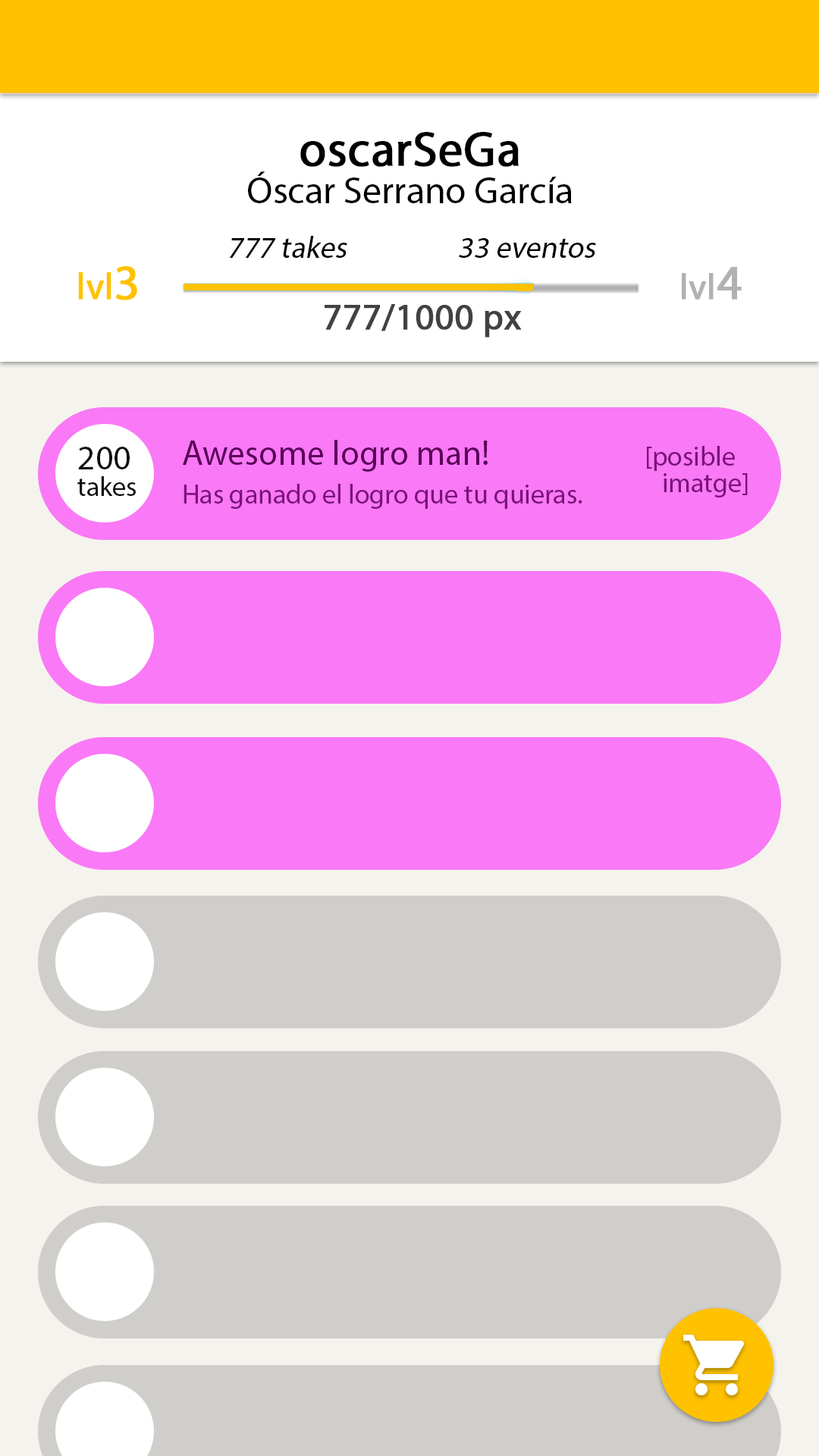
<style>
.page{position:relative;width:819px;height:1456px;background:#cfcecb}
.page>*{position:absolute;margin:0}
.t1{font:37.9px/37.9px "MyriadPro-Regular";color:#000000}
.t2{font:48.5px/31.1px "MyriadPro-Regular";color:#000000;font-weight:bold}
.t3{font:30.3px "MyriadPro-Regular";color:#000000;font-style:italic}
.t4{font:36.4px "MyriadPro-Regular";color:#ffc200;font-weight:bold}
.t5{font:48.5px "MyriadPro-Regular";color:#ffc200;font-weight:bold}
.t6{font:35.6px "MyriadPro-Regular";color:#b3b0b3;font-weight:bold}
.t7{font:48.5px "MyriadPro-Regular";color:#b3b0b3;font-weight:bold}
.t8{font:36.4px "MyriadPro-Regular";color:#424242;font-weight:bold}
.t9{font:27.3px/26.5px "MyriadPro-Regular";color:#101010}
.t10{font:34.9px/26.5px "MyriadPro-Regular";color:#101010}
.t11{font:34.9px "MyriadPro-Regular";color:#5b005b}
.t12{font:27.3px/26.5px "MyriadPro-Regular";color:#7a137a}
.t13{font:27.3px "MyriadPro-Regular";color:#7a137a}
</style>
<div class="page">
<p class="t1" style="left:248px;top:132px;width:324px;height:71px;text-align:center"><span class="t2">oscarSeGa<br></span>Óscar Serrano García</p>
<p class="t3" style="left:229px;top:236px;width:118px;height:22px">777 takes</p>
<p class="t3" style="left:459px;top:238px;width:137px;height:20px">33 eventos</p>
<p class="t4" style="left:78px;top:266px;width:59px;height:34px">lvl<span class="t5">3</span></p>
<p class="t6" style="left:682px;top:267px;width:60px;height:33px">lvl<span class="t7">4</span></p>
<p class="t8" style="left:325px;top:304px;width:197px;height:33px">777/1000 px</p>
<p class="t9" style="left:77px;top:447px;width:59px;height:49px"><span class="t10">200<br></span>takes</p>
<p class="t11" style="left:183px;top:440px;width:305px;height:32px">Awesome logro man!</p>
<p class="t12" style="left:647px;top:446px;width:101px;height:51px">[posible<br>   imatge]</p>
<p class="t13" style="left:184px;top:484px;width:398px;height:25px">Has ganado el logro que tu quieras.</p>
</div>
